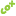
<style>
.page{position:relative;width:16px;height:16px;background:#ffffff}
.page>*{position:absolute;margin:0}
.t1{font:8px "LithosPro-Black";color:#93ca3a}
</style>
<div class="page">
<p class="t1" style="left:0px;top:0px;width:16px;height:14px;rotate:-42deg">Cox</p>
</div>
